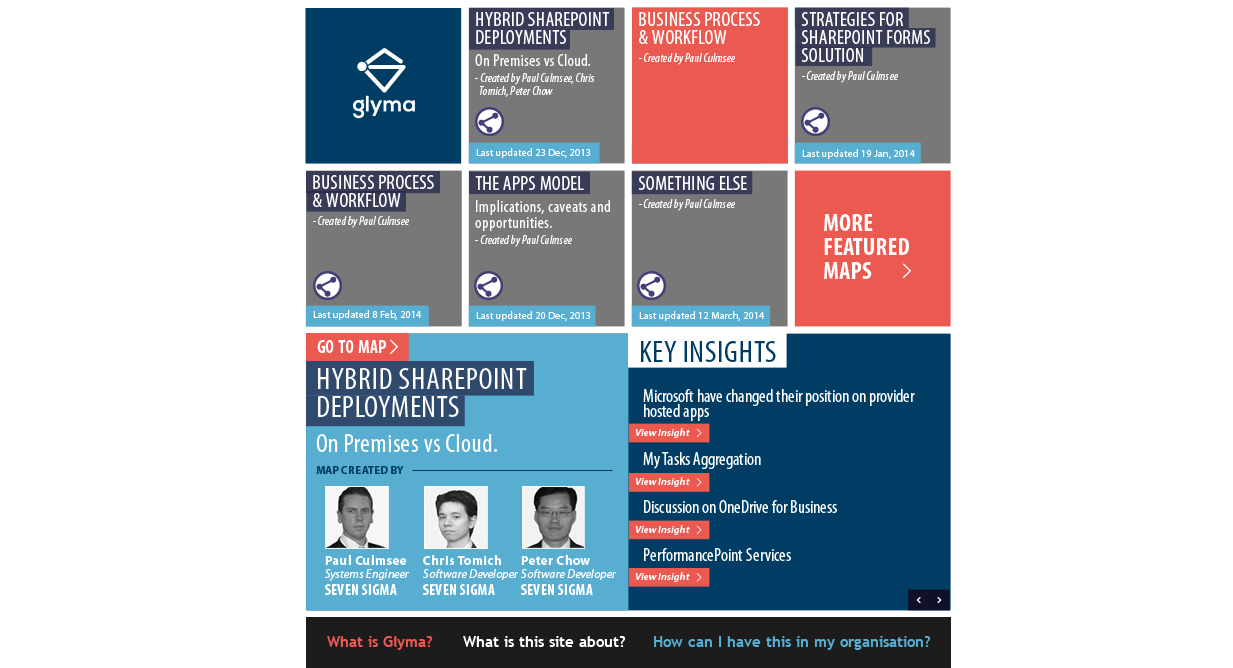
<style>
.page{position:relative;width:1233px;height:668px;background:#ffffff}
.page>*{position:absolute;margin:0}
.t1{font:12px/16px "MyriadPro-CondIt";letter-spacing:0.02em;color:#ffffff}
.t2{font:19.7px/18.2px "MyriadPro-Cond";letter-spacing:0.02em;color:#ffffff;text-transform:uppercase}
.t3{font:16.5px/22px "MyriadPro-Cond";letter-spacing:0.02em;color:#ffffff}
.t4{font:12px/13px "MyriadPro-CondIt";letter-spacing:0.02em;color:#ffffff}
.t5{font:19.7px/18.2px "MyriadPro-Cond";letter-spacing:0.02em;color:#ffffff}
.t6{font:12px/18px "MyriadPro-CondIt";letter-spacing:0.02em;color:#ffffff}
.t7{font:10px "MyriadPro-Regular";letter-spacing:0.02em;color:#ffffff}
.t8{font:16.5px/16px "MyriadPro-Cond";letter-spacing:0.02em;color:#ffffff}
.t9{font:24.9px/23.9px "MyriadPro-BoldCond";color:#ffffff}
.t10{font:18px "MyriadPro-BoldCond";letter-spacing:0.02em;color:#ffffff}
.t11{font:31px "MyriadPro-Cond";letter-spacing:0.02em;color:#003d64;text-transform:uppercase}
.t12{font:31px/28.6px "MyriadPro-Cond";letter-spacing:0.02em;color:#ffffff;text-transform:uppercase}
.t13{font:25.9px/34.6px "MyriadPro-Cond";letter-spacing:0.02em;color:#ffffff}
.t14{font:18px/16px "MyriadPro-Cond";color:#ffffff}
.t15{font:18px "MyriadPro-Cond";color:#ffffff}
.t16{font:18px/15px "MyriadPro-Cond";color:#ffffff}
.t17{font:10.4px "MyriadPro-SemiboldIt";color:#ffffff}
.t18{font:11px "MyriadPro-Bold";letter-spacing:0.02em;color:#003d64;text-transform:uppercase}
.t19{font:12px/13px "MyriadPro-It";letter-spacing:0.02em;color:#ffffff}
.t20{font:13px/13px "MyriadPro-Bold";letter-spacing:0.02em;color:#ffffff}
.t21{font:15px/16px "MyriadPro-BoldCond";letter-spacing:0.02em;color:#ffffff}
.t22{font:15px "TrebuchetMS-Bold";color:#eb5a51}
.t23{font:15px "TrebuchetMS-Bold";color:#ffffff}
.t24{font:15px "TrebuchetMS-Bold";color:#58aed1}
</style>
<div class="page">
<p class="t1" style="left:475px;top:12px;width:135px;height:85px"><span class="t2">Hybrid sharepoint<br>deployments<br></span><span class="t3">On Premises vs Cloud.<br></span>- Created by Paul Culmsee, Chris<br><span class="t4">  Tomich, Peter Chow</span></p>
<p class="t5" style="left:639px;top:12px;width:121px;height:53px">BUSINESS PROCESS<br>&amp; WORKFLOW<br><span class="t6">- Created by Paul Culmsee</span></p>
<p class="t5" style="left:639px;top:12px;width:121px;height:53px">BUSINESS PROCESS<br>&amp; WORKFLOW<br><span class="t6">- Created by Paul Culmsee</span></p>
<p class="t2" style="left:801px;top:12px;width:129px;height:71px">STRATEGIES FOR<br>SHAREPOINT FORMS<br>SOLUTION<br><span class="t6">- Created by Paul Culmsee</span></p>
<p class="t7" style="left:476px;top:148px;width:115px;height:10px">Last updated 23 Dec, 2013</p>
<p class="t7" style="left:802px;top:149px;width:113px;height:10px">Last updated 19 Jan, 2014</p>
<p class="t5" style="left:313px;top:175px;width:121px;height:53px">BUSINESS PROCESS<br>&amp; WORKFLOW<br><span class="t6">- Created by Paul Culmsee</span></p>
<p class="t1" style="left:475px;top:176px;width:135px;height:71px"><span class="t5">THE APPS MODEL<br></span><span class="t3">Implications, cave</span><span class="t8">ats and<br>opportunities.<br></span>- Created by Paul Culmsee</p>
<p class="t6" style="left:638px;top:176px;width:109px;height:35px"><span class="t5">SOMETHING ELSE<br></span>- Created by Paul Culmsee</p>
<p class="t9" style="left:824px;top:214px;width:85px;height:65px">MORE<br>FEATURED<br>MAPS</p>
<p class="t7" style="left:313px;top:310px;width:108px;height:10px">Last updated 8 Feb, 2014</p>
<p class="t7" style="left:476px;top:311px;width:115px;height:10px">Last updated 20 Dec, 2013</p>
<p class="t7" style="left:639px;top:311px;width:125px;height:10px">Last updated 12 March, 2014</p>
<p class="t10" style="left:317px;top:340px;width:69px;height:13px">GO TO MAP</p>
<p class="t11" style="left:641px;top:341px;width:135px;height:21px">key insights</p>
<p class="t12" style="left:316px;top:368px;width:211px;height:84px">Hybrid sharepoint<br>deployments<br><span class="t13">On Premises vs Cloud.</span></p>
<p class="t14" style="left:643px;top:389px;width:272px;height:172px"><span class="t15">Mic</span><span class="t16">rosoft have changed their position on provider hosted apps<br></span><br><br>My Tasks Aggregation<br><br><br>Discussion on OneDrive for Business<br><br><br>PerformancePoint Services</p>
<p class="t17" style="left:635px;top:428px;width:55px;height:10px">View Insight</p>
<p class="t18" style="left:316px;top:466px;width:88px;height:8px">Map Created By</p>
<p class="t17" style="left:635px;top:477px;width:55px;height:10px">View Insight</p>
<p class="t17" style="left:635px;top:525px;width:55px;height:10px">View Insight</p>
<p class="t19" style="left:325px;top:555px;width:84px;height:40px"><span class="t20">Paul Culmsee<br></span>Systems Engineer<br><span class="t21">SEVEN SIGMA</span></p>
<p class="t19" style="left:423px;top:555px;width:95px;height:40px"><span class="t20">Chris Tomich<br></span>Software Developer<br><span class="t21">SEVEN SIGMA</span></p>
<p class="t19" style="left:521px;top:555px;width:95px;height:40px"><span class="t20">Peter Chow<br></span>Software Developer<br><span class="t21">SEVEN SIGMA</span></p>
<p class="t17" style="left:635px;top:572px;width:55px;height:10px">View Insight</p>
<p class="t22" style="left:327px;top:636px;width:106px;height:14px">What is Glyma?</p>
<p class="t23" style="left:463px;top:636px;width:163px;height:11px">What is this site about?</p>
<p class="t24" style="left:654px;top:636px;width:277px;height:14px">How can I have this in my organisation?</p>
</div>
